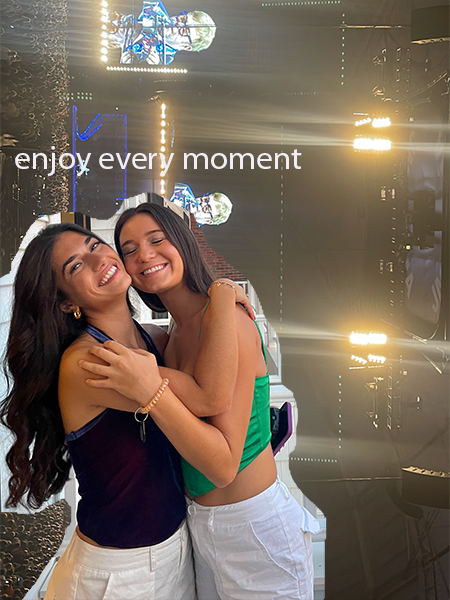
<style>
.page{position:relative;width:450px;height:600px}
.page>*{position:absolute;margin:0}
.t1{font:33.3px "MyriadPro-Regular";color:#f0edf4}
</style>
<div class="page">
<p class="t1" style="left:15px;top:146px;width:287px;height:31px">enjoy every moment</p>
</div>
